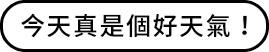
<style>
.page{position:relative;width:269px;height:52px;background:#ffffff}
.page>*{position:absolute;margin:0}
.t1{font:25px "NotoSansCJKtc-Medium";letter-spacing:0.06em;color:#060606}
</style>
<div class="page">
<p class="t1" style="left:21px;top:13px;width:226px;height:25px">今天真是個好天氣！</p>
</div>
